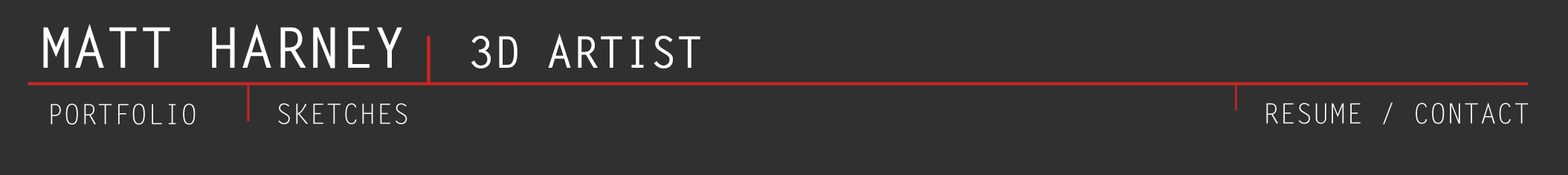
<style>
.page{position:relative;width:1568px;height:175px;background:#303030}
.page>*{position:absolute;margin:0}
.t1{font:43.4px "LetterGothicStd-Bold";color:#ffffff}
.t2{font:27.9px "LetterGothicStd";color:#ffffff}
</style>
<div class="page">
<p class="t1" style="left:471px;top:33px;width:229px;height:35px">3D ARTIST</p>
<p class="t2" style="left:1266px;top:102px;width:263px;height:22px">RESUME / CONTACT</p>
<p class="t2" style="left:51px;top:103px;width:145px;height:22px">PORTFOLIO</p>
<p class="t2" style="left:278px;top:103px;width:129px;height:21px">SKETCHES</p>
</div>
